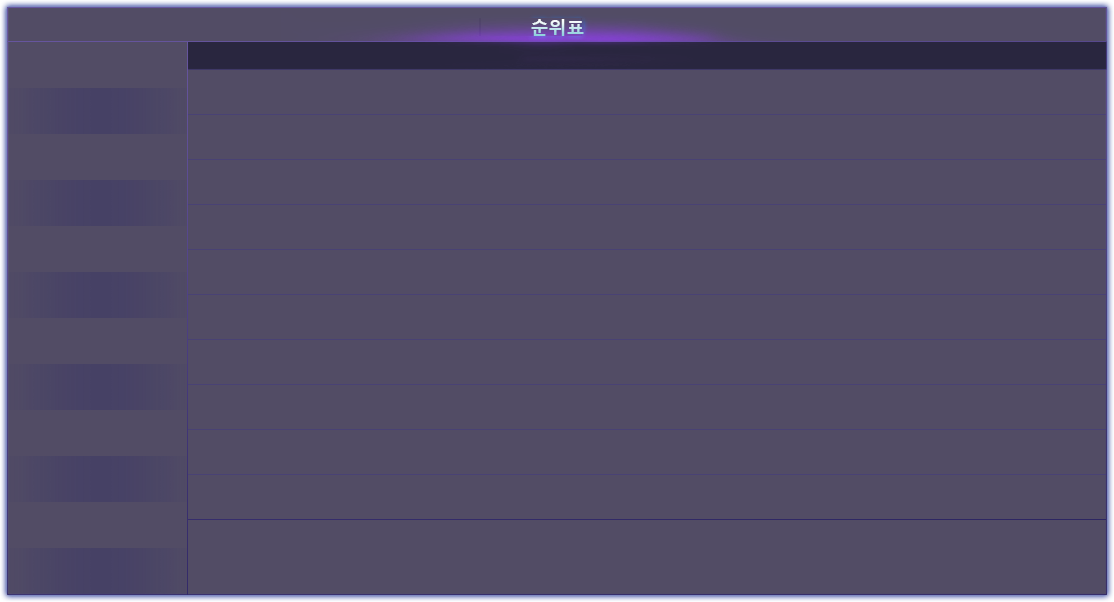
<style>
.page{position:relative;width:1114px;height:602px;background:#524c65}
.page>*{position:absolute;margin:0}
.t1{font:18px "MalgunGothicBold"}
</style>
<div class="page">
<p class="t1" style="left:531px;top:19px;width:53px;height:17px">순위표</p>
</div>
